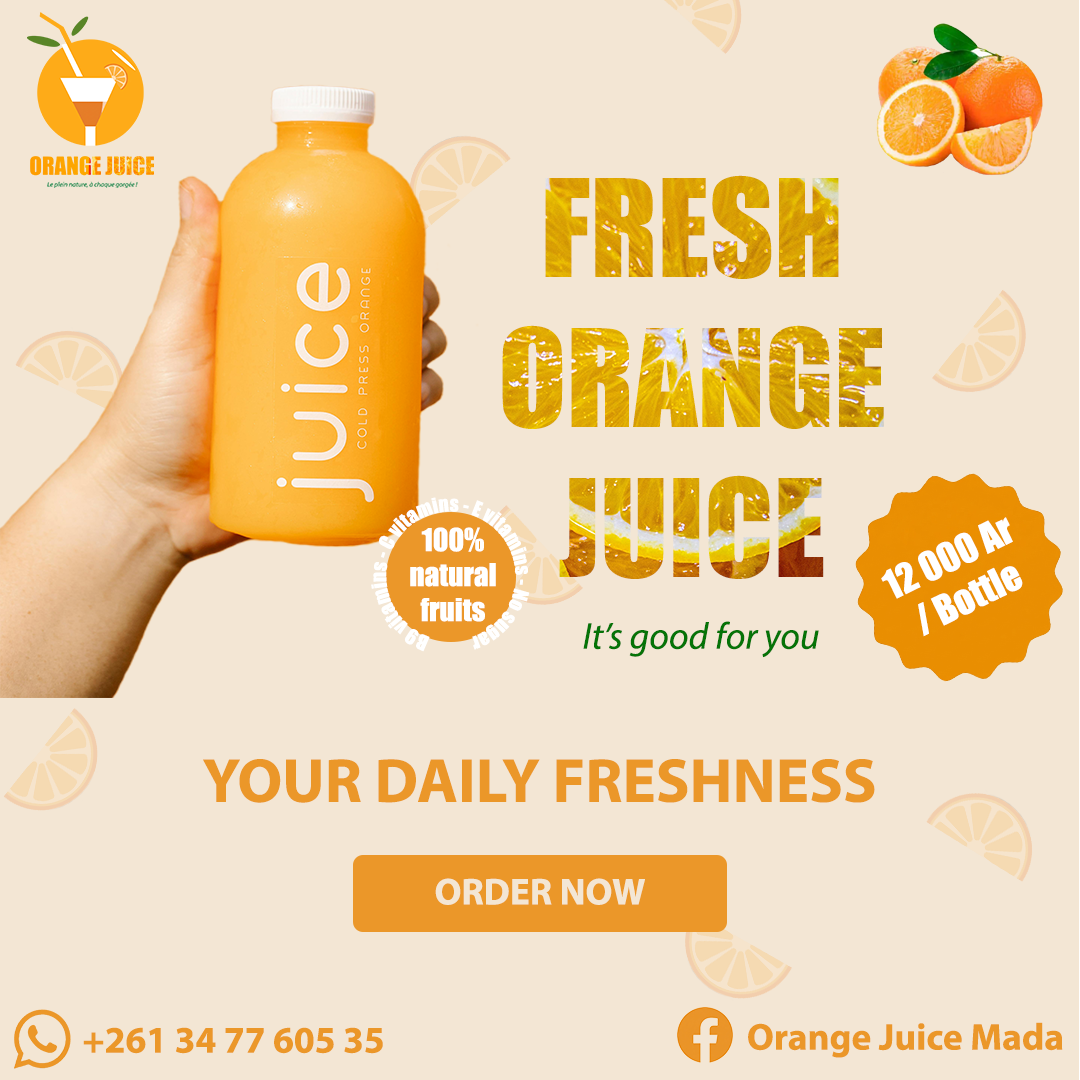
<style>
.page{position:relative;width:1080px;height:1080px;background:#f3e6d4}
.page>*{position:absolute;margin:0}
.t1{font:125px "Impact"}
.t2{font:19.4px "Impact";color:#ffffff}
.t3{font:37.5px "Impact";color:#ffffff}
.t4{font:29.2px "Impact";color:#ffffff}
.t5{font:37.5px "MyriadPro-It";color:#057307}
.t6{font:62.5px "MyriadPro-Bold";color:#eb9729}
.t7{font:37.5px "MyriadPro-Bold";color:#f3e6d4}
.t8{font:37.5px "MyriadPro-Bold";color:#eb9729}
</style>
<div class="page">
<p class="t1" style="left:502px;top:175px;width:382px;height:404px;text-align:center">FRESH<br>ORANGE<br>JUICE</p>
<p class="t2" style="left:371px;top:497px;width:159px;height:155px;text-align:center">B9 vitamins - C vitamins - E vitamins - No sugar</p>
<p class="t3" style="left:881px;top:517px;width:142px;height:120px;rotate:-26deg">12 000 Ar / Bottle</p>
<p class="t4" style="left:410px;top:527px;width:86px;height:95px;text-align:center">100% natural fruits</p>
<p class="t5" style="left:583px;top:621px;width:236px;height:37px">It’s good for you</p>
<p class="t6" style="left:203px;top:759px;width:672px;height:44px">YOUR DAILY FRESHNESS</p>
<p class="t7" style="left:435px;top:878px;width:210px;height:27px">ORDER NOW</p>
<p class="t8" style="left:748px;top:1022px;width:315px;height:36px">Orange Juice Mada</p>
<p class="t8" style="left:83px;top:1027px;width:300px;height:27px">+261 34 77 605 35</p>
</div>
